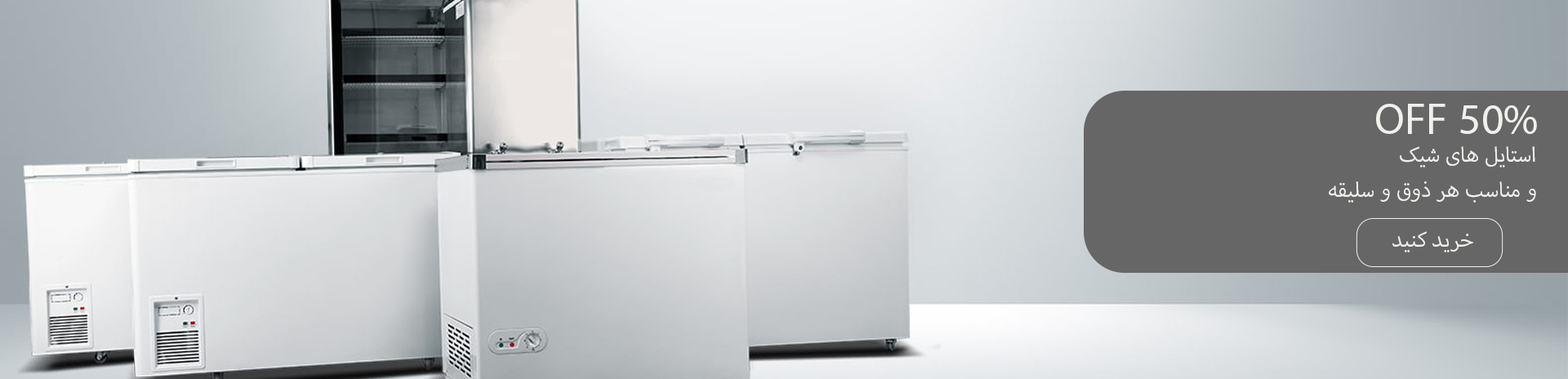
<style>
.page{position:relative;width:1568px;height:379px}
.page>*{position:absolute;margin:0}
.t1{font:61.2px "MyriadArabic-Regular";color:#f0f1ec}
.t2{font:29.4px "MyriadArabic-Regular";color:#f0f1ec}
</style>
<div class="page">
<p class="t1" style="left:1376px;top:104px;width:161px;height:30px">50% OFF</p>
<p class="t2" style="left:1329px;top:146px;width:207px;height:57px">استایل های شیک<br>و مناسب هر ذوق و سلیقه</p>
<p class="t2" style="left:1392px;top:231px;width:81px;height:21px">خرید کنید</p>
</div>
